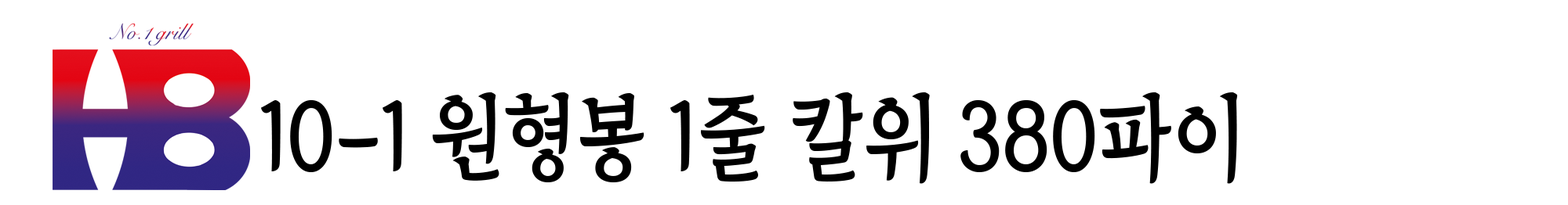
<style>
.page{position:relative;width:1568px;height:205px;background:#ffffff}
.page>*{position:absolute;margin:0}
.t1{font:93.7px "TheIndependenceHallofKorea-Regular";color:#000000;scale:0.89 1}
</style>
<div class="page">
<p class="t1" style="left:261px;top:93px;width:977px;height:91px">10-1 원형봉 1줄 칼위 380파이</p>
</div>
